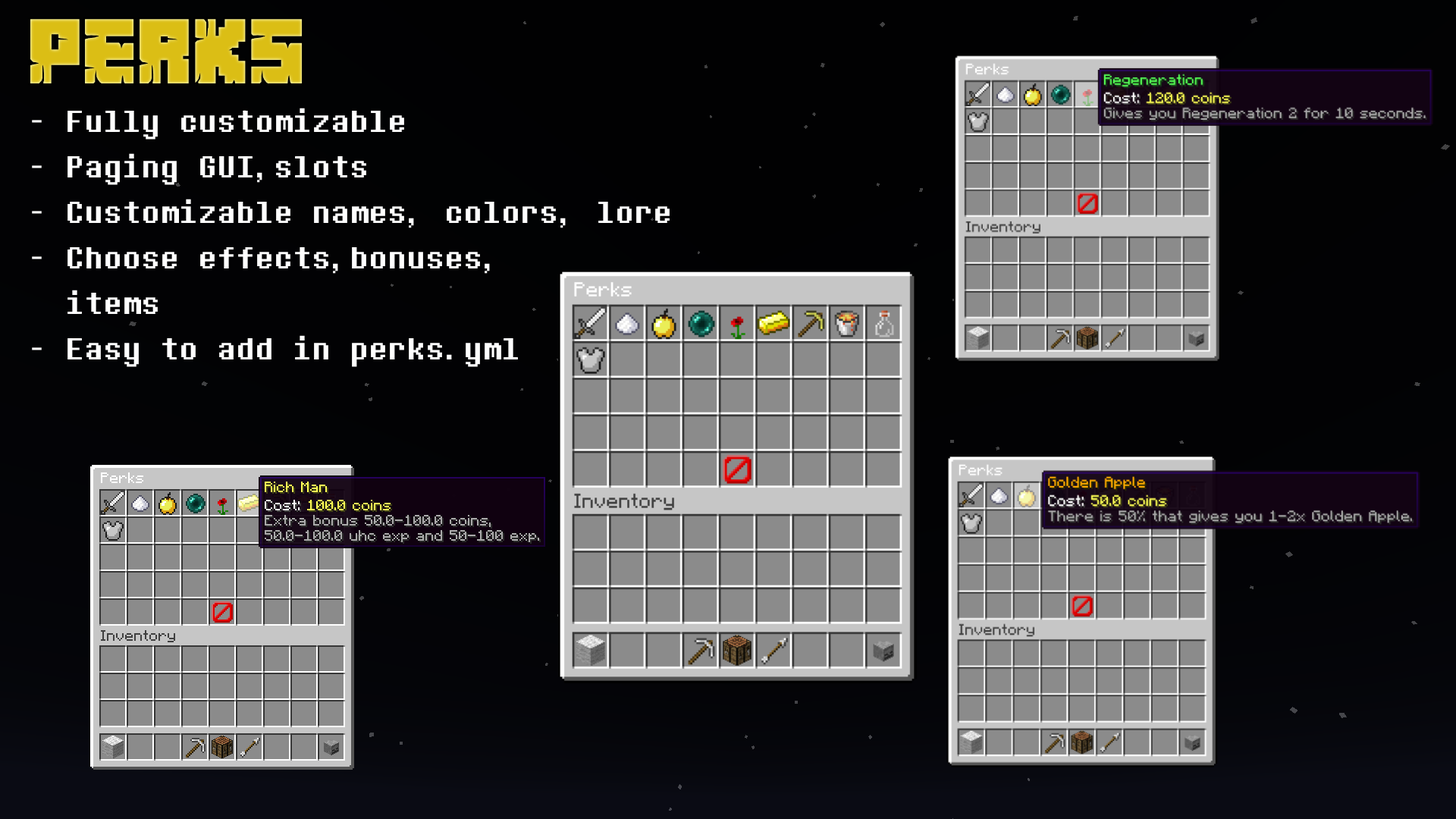
<style>
.page{position:relative;width:1456px;height:819px}
.page>*{position:absolute;margin:0}
.t1{font:81.9px "MinecrafterAlt";color:#dbbe15}
.t2{font:37.9px "DeterminationMonoWeb";color:#ffffff}
</style>
<div class="page">
<p class="t1" style="left:30px;top:19px;width:273px;height:64px">PERKS</p>
<p class="t2" style="left:32px;top:108px;width:638px;height:259px">- Fully customizable<br>- Paging GUI,slots<br>- Customizable names, colors, lore<br>- Choose effects,bonuses,<br>  items<br>- Easy to add in perks.yml</p>
</div>
